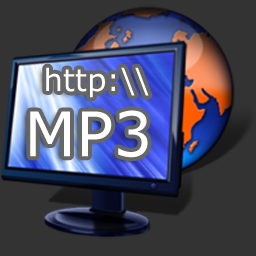
<style>
.page{position:relative;width:256px;height:256px;background:#333333}
.page>*{position:absolute;margin:0}
.t1{font:30.7px "Verdana";color:#ffffff}
.t2{font:61.4px "Verdana";color:#ffffff}
</style>
<div class="page">
<p class="t1" style="left:46px;top:67px;width:103px;height:31px">http:\\</p>
<p class="t2" style="left:30px;top:110px;width:118px;height:48px">MP3</p>
</div>
